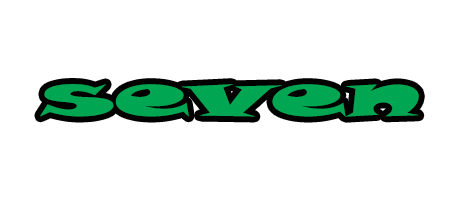
<style>
.page{position:relative;width:462px;height:199px;background:#ffffff}
.page>*{position:absolute;margin:0}
.t1{font:60px "SnapITC-Regular";color:#00a651;scale:2 1}
</style>
<div class="page">
<p class="t1" style="left:40px;top:84px;width:379px;height:33px">seven</p>
</div>
